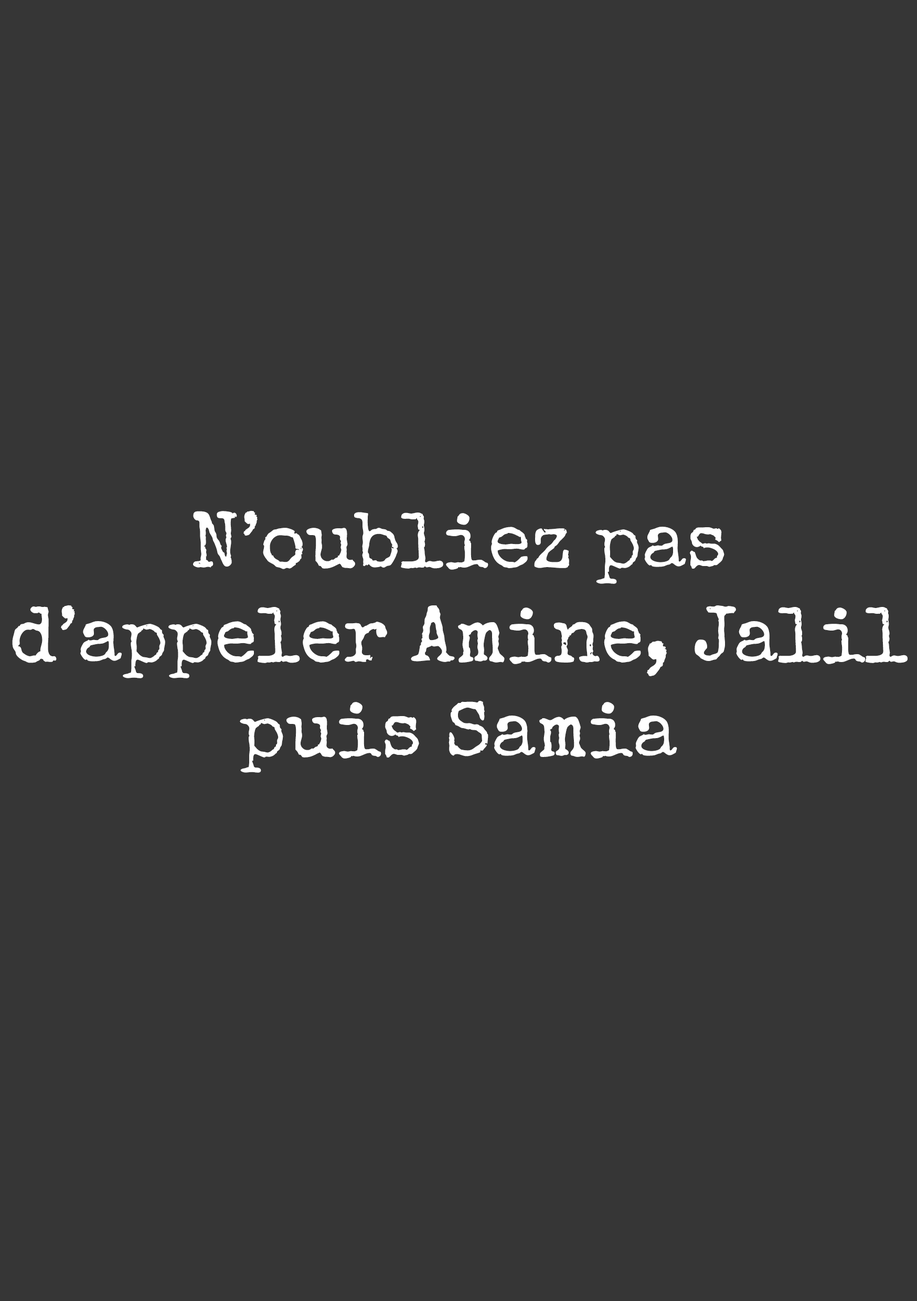
<style>
.page{position:relative;width:917px;height:1301px;background:#363636}
.page>*{position:absolute;margin:0}
.t1{font:78.7px "SpecialElite-Regular";color:#ffffff}
</style>
<div class="page">
<p class="t1" style="left:12px;top:510px;width:895px;height:263px;text-align:center">N’oubliez pas d’appeler Amine, Jalil puis Samia</p>
</div>
